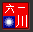
<style>
.page{position:relative;width:33px;height:32px;background:#f20000}
.page>*{position:absolute;margin:0}
.t1{font:10.4px "SimSun";color:#ffffff}
.t2{font:11.7px "SimSun";color:#ffffff}
</style>
<div class="page">
<p class="t1" style="left:5px;top:4px;width:20px;height:9px">六一</p>
<p class="t2" style="left:16px;top:15px;width:11px;height:12px">川</p>
</div>
